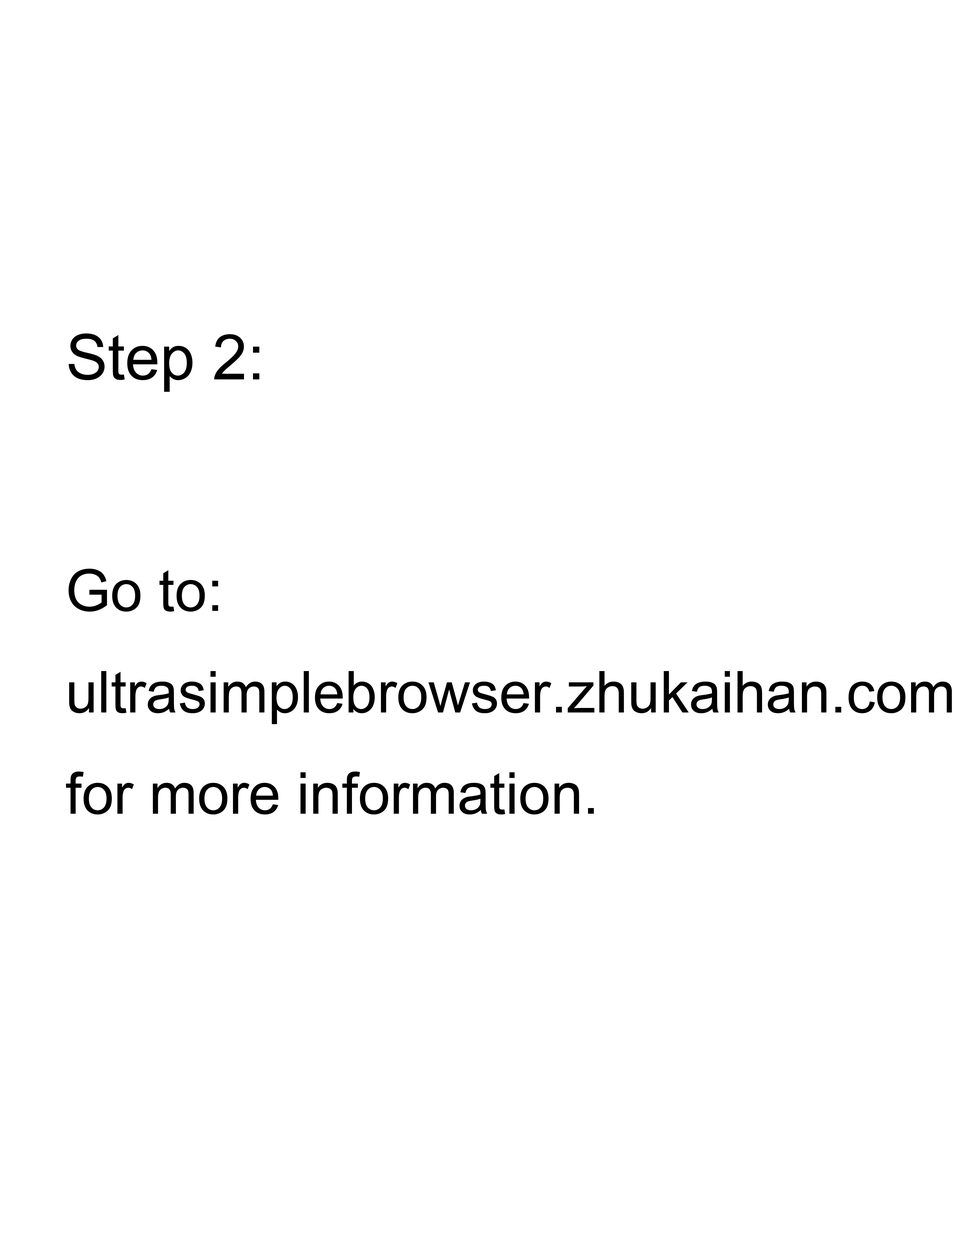
<style>
.page{position:relative;width:960px;height:1242px;background:#ffffff}
.page>*{position:absolute;margin:0}
.t1{font:62.7px "ArialMT";color:#000000}
.t2{font:58px "ArialMT";color:#000000}
</style>
<div class="page">
<p class="t1" style="left:69px;top:334px;width:190px;height:58px">Step 2:</p>
<p class="t2" style="left:66px;top:569px;width:886px;height:246px">Go to:<br>ultrasimplebrowser.zhukaihan.com<br>for more information.</p>
</div>
